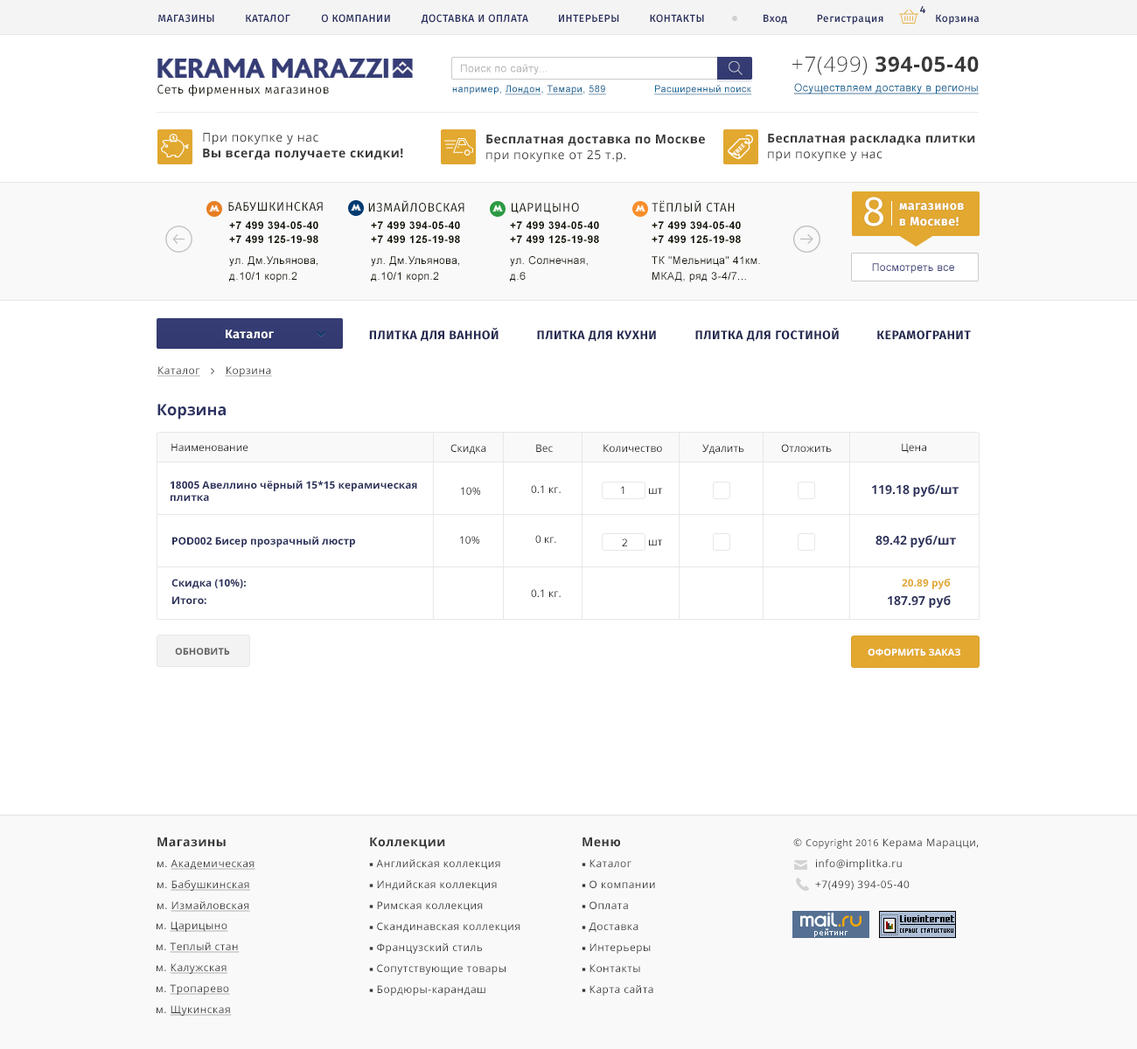
<style>
.page{position:relative;width:1137px;height:1049px;background:#ffffff}
.page>*{position:absolute;margin:0}
.t1{font:10.5px "FiraSans-Medium";letter-spacing:0.04em;color:#292f60}
.t2{font:10.5px "FiraSans-Medium";letter-spacing:0.04em;color:#292f60;text-transform:uppercase}
.t3{font:10.5px "ArialMT";letter-spacing:0.04em;color:#b3b3b3}
.t4{font:21px "OpenSans-Bold";letter-spacing:0.04em;color:#383838;text-transform:uppercase}
.t5{font:21px "OpenSans-Light";letter-spacing:0.04em;color:#383838;text-transform:uppercase}
.t6{font:12.2px "FiraSans-Book";letter-spacing:0.04em;color:#151408}
.t7{font:9.6px "ArialMT";letter-spacing:0.04em;color:#106394}
.t8{font:9.6px "ArialMT";letter-spacing:0.04em;color:#106394;text-decoration:underline}
.t9{font:10.5px "ArialMT";letter-spacing:0.04em;color:#106394;text-decoration:underline}
.t10{font:12.2px/15.7px "OpenSans-Bold";letter-spacing:0.04em;color:#383838}
.t11{font:12.2px/15.7px "OpenSans";letter-spacing:0.04em;color:#383838}
.t12{font:6.1px "FiraSans-Bold";letter-spacing:0.04em;color:#ffffff;text-transform:uppercase}
.t13{font:42px "FiraSans-Book";letter-spacing:0.04em;color:#ffffff}
.t14{font:12.2px "FiraSans-Regular";letter-spacing:0.04em;color:#151408;text-transform:uppercase}
.t15{font:12.2px/15.7px "FiraSans-Bold";letter-spacing:0.04em;color:#ffffff}
.t16{font:10.5px/9.4px "Arial-BoldMT";letter-spacing:0.04em;color:#151408;text-transform:uppercase}
.t17{font:10.5px/14px "Arial-BoldMT";letter-spacing:0.04em;color:#151408;text-transform:uppercase}
.t18{font:10.5px/21px "ArialMT";letter-spacing:0.04em;color:#151408}
.t19{font:10.5px/15.7px "ArialMT";letter-spacing:0.04em;color:#151408}
.t20{font:10.5px "ArialMT";letter-spacing:0.04em;color:#363d75}
.t21{font:12.2px "FiraSans-Bold";letter-spacing:0.04em;color:#ffffff}
.t22{font:12.2px "FiraSans-Bold";letter-spacing:0.04em;color:#222750;text-transform:uppercase}
.t23{font:10.5px "OpenSans";letter-spacing:0.04em;color:#383838;text-decoration:underline}
.t24{font:15.7px "OpenSans-Bold";color:#2d3363}
.t25{font:10.5px "OpenSans";color:#212121}
.t26{font:10.5px/12.2px "OpenSans-Bold";color:#2a305b}
.t27{font:12.2px "OpenSans-Bold";color:#2a305b}
.t28{font:10.5px "OpenSans"}
.t29{font:10.5px "OpenSans-Bold";color:#2a305b}
.t30{font:10.5px "OpenSans-Bold";color:#e2a830}
.t31{font:9.6px "OpenSans-Bold";color:#616161;text-transform:uppercase}
.t32{font:9.6px "OpenSans-Bold";color:#ffffff;text-transform:uppercase}
.t33{font:10.5px/21px "OpenSans";letter-spacing:0.04em;color:#383838;text-decoration:underline}
.t34{font:12.2px/21px "OpenSans-Bold";letter-spacing:0.04em;color:#383838}
.t35{font:10.5px/21px "OpenSans";letter-spacing:0.04em;color:#383838}
.t36{font:10.5px/21px "MinionPro-Regular";letter-spacing:0.04em;color:#383838}
.t37{font:10.5px "OpenSans";letter-spacing:0.04em;color:#383838}
.t38{font:9.6px "OpenSans";letter-spacing:0.04em;color:#383838}
.t39{font:10.5px/15.7px "OpenSans";letter-spacing:0.04em;color:#383838}
</style>
<div class="page">
<p class="t1" style="left:920px;top:5px;width:5px;height:8px">4</p>
<p class="t2" style="left:158px;top:14px;width:56px;height:9px">магазины</p>
<p class="t2" style="left:246px;top:14px;width:44px;height:9px">каталог</p>
<p class="t2" style="left:321px;top:14px;width:69px;height:9px">о компании</p>
<p class="t2" style="left:421px;top:14px;width:107px;height:10px">доставка и оплата</p>
<p class="t2" style="left:559px;top:14px;width:60px;height:8px">интерьеры</p>
<p class="t2" style="left:650px;top:14px;width:54px;height:9px">контакты</p>
<p class="t1" style="left:763px;top:14px;width:24px;height:10px">Вход</p>
<p class="t1" style="left:817px;top:14px;width:66px;height:10px">Регистрация</p>
<p class="t1" style="left:935px;top:14px;width:44px;height:10px">Корзина</p>
<p class="t3" style="left:461px;top:64px;width:86px;height:10px">Поиск по сайту...</p>
<p class="t4" style="left:792px;top:56px;width:186px;height:19px"><span class="t5">+7(499) </span>394-05-40</p>
<p class="t6" style="left:157px;top:84px;width:172px;height:12px">Сеть фирменных магазинов</p>
<p class="t7" style="left:452px;top:85px;width:154px;height:10px">например, <span class="t8">Лондон</span>, <span class="t8">Темари</span>, <span class="t8">589</span></p>
<p class="t8" style="left:654px;top:85px;width:98px;height:10px">Расширенный поиск</p>
<p class="t9" style="left:794px;top:83px;width:184px;height:11px">Осуществляем доставку в регионы</p>
<p class="t10" style="left:203px;top:133px;width:200px;height:28px"><span class="t11">При покупке у нас <br></span>Вы всегда получаете скидки!</p>
<p class="t10" style="left:486px;top:135px;width:219px;height:28px">Бесплатная доставка по Москве <br><span class="t11">при покупке от 25 т.р.</span></p>
<p class="t10" style="left:768px;top:134px;width:207px;height:28px">Бесплатная раскладка плитки <br><span class="t11">при покупке у нас</span></p>
<p class="t12" style="left:733px;top:143px;width:13px;height:13px;rotate:-45deg">Free</p>
<p class="t13" style="left:864px;top:197px;width:19px;height:29px">8</p>
<p class="t14" style="left:228px;top:202px;width:95px;height:10px">БАБУШКИНСКАЯ</p>
<p class="t14" style="left:368px;top:200px;width:96px;height:12px">ИЗМАЙЛОВСКАЯ</p>
<p class="t14" style="left:511px;top:203px;width:68px;height:10px">царицыно</p>
<p class="t14" style="left:651px;top:200px;width:83px;height:12px">ТЁПЛЫЙ СТАН</p>
<p class="t15" style="left:899px;top:203px;width:64px;height:23px">магазинов <br>в Москве!</p>
<p class="t16" style="left:229px;top:221px;width:89px;height:61px">+7 499 394-05-40 <br><span class="t17">+7 499 125-19-98<br></span><span class="t18">ул. Дм.Ульянова, <br></span><span class="t19">д.10/1 корп.2</span></p>
<p class="t16" style="left:371px;top:221px;width:89px;height:61px">+7 499 394-05-40 <br><span class="t17">+7 499 125-19-98<br></span><span class="t18">ул. Дм.Ульянова, <br></span><span class="t19">д.10/1 корп.2</span></p>
<p class="t16" style="left:510px;top:221px;width:89px;height:61px">+7 499 394-05-40 <br><span class="t17">+7 499 125-19-98<br></span><span class="t18">ул. Солнечная, <br></span><span class="t19">д.6</span></p>
<p class="t18" style="left:651px;top:221px;width:109px;height:61px"><span class="t16">+7 499 394-05-40 <br></span><span class="t17">+7 499 125-19-98<br></span>ТК "Мельница" 41км. <br><span class="t19">МКАД, ряд 3-4/7...</span></p>
<p class="t20" style="left:872px;top:263px;width:82px;height:11px">Посмотреть все</p>
<p class="t21" style="left:226px;top:330px;width:48px;height:9px">Каталог</p>
<p class="t22" style="left:369px;top:328px;width:129px;height:14px">плитка для ванной</p>
<p class="t22" style="left:695px;top:328px;width:143px;height:14px">плитка для гостиной</p>
<p class="t22" style="left:537px;top:330px;width:119px;height:12px">плитка для кухни</p>
<p class="t22" style="left:877px;top:330px;width:93px;height:10px">керамогранит</p>
<p class="t23" style="left:157px;top:366px;width:115px;height:11px">Каталог        Корзина</p>
<p class="t24" style="left:157px;top:404px;width:69px;height:16px">Корзина</p>
<p class="t25" style="left:171px;top:443px;width:77px;height:8px">Наименование</p>
<p class="t25" style="left:450px;top:444px;width:36px;height:11px">Скидка</p>
<p class="t25" style="left:536px;top:444px;width:17px;height:8px">Вес</p>
<p class="t25" style="left:603px;top:444px;width:59px;height:8px">Количество</p>
<p class="t25" style="left:702px;top:444px;width:42px;height:11px">Удалить</p>
<p class="t25" style="left:781px;top:444px;width:50px;height:8px">Отложить</p>
<p class="t25" style="left:901px;top:443px;width:25px;height:11px">Цена</p>
<p class="t26" style="left:170px;top:480px;width:247px;height:21px">18005 Авеллино чёрный 15*15 керамическая <br>плитка</p>
<p class="t25" style="left:531px;top:485px;width:29px;height:8px">0.1 кг.</p>
<p class="t27" style="left:872px;top:484px;width:86px;height:13px">119.18 руб/шт</p>
<p class="t25" style="left:461px;top:487px;width:20px;height:8px">10%</p>
<p class="t28" style="left:621px;top:486px;width:3px;height:8px">1</p>
<p class="t25" style="left:649px;top:488px;width:13px;height:6px">шт</p>
<p class="t29" style="left:172px;top:536px;width:183px;height:11px">POD002 Бисер прозрачный люстр</p>
<p class="t25" style="left:460px;top:536px;width:20px;height:8px">10%</p>
<p class="t25" style="left:535px;top:535px;width:21px;height:8px">0 кг.</p>
<p class="t25" style="left:622px;top:539px;width:5px;height:7px">2</p>
<p class="t25" style="left:649px;top:539px;width:13px;height:7px">шт</p>
<p class="t27" style="left:875px;top:535px;width:81px;height:13px">89.42 руб/шт</p>
<p class="t29" style="left:171px;top:579px;width:75px;height:10px">Скидка (10%):</p>
<p class="t30" style="left:901px;top:579px;width:49px;height:10px">20.89 руб</p>
<p class="t25" style="left:531px;top:589px;width:29px;height:8px">0.1 кг.</p>
<p class="t29" style="left:172px;top:596px;width:34px;height:8px">Итого:</p>
<p class="t27" style="left:887px;top:595px;width:63px;height:14px">187.97 руб</p>
<p class="t31" style="left:175px;top:648px;width:55px;height:7px">Обновить</p>
<p class="t32" style="left:867px;top:649px;width:93px;height:7px">оформить заказ</p>
<p class="t33" style="left:157px;top:838px;width:98px;height:74px"><span class="t34">Магазины<br></span><span class="t35">м. </span>Академическая<br><span class="t35">м. </span>Бабушкинская<br><span class="t35">м. </span>Измайловская</p>
<p class="t35" style="left:369px;top:838px;width:151px;height:158px"><span class="t34">Коллекции<br></span><span class="t36">■ </span>Английская коллекция<br><span class="t36">■ </span>Индийская коллекция<br><span class="t36">■ </span>Римская коллекция<br><span class="t36">■ </span>Скандинавская коллекция<br><span class="t36">■ </span>Французский стиль<br><span class="t36">■ </span>Сопутствующие товары<br><span class="t36">■ </span>Бордюры-карандаш</p>
<p class="t35" style="left:581px;top:838px;width:74px;height:158px"><span class="t34">Меню<br></span><span class="t36">■ </span>Каталог<br><span class="t36">■ </span>О компании<br><span class="t36">■ </span>Оплата<br><span class="t36">■ </span>Доставка<br><span class="t36">■ </span>Интерьеры<br><span class="t36">■ </span>Контакты<br><span class="t36">■ </span>Карта сайта</p>
<p class="t37" style="left:793px;top:838px;width:185px;height:11px">© <span class="t38">Copyright 2016</span> Керама Марацци,</p>
<p class="t35" style="left:815px;top:859px;width:94px;height:31px">info@implitka.ru<br>+7(499) 394-05-40</p>
<p class="t33" style="left:156px;top:921px;width:84px;height:95px"><span class="t39"><br></span><span class="t35">м. </span>Царицыно<br><span class="t35">м. </span>Теплый стан<br><span class="t35">м. </span>Калужская<br><span class="t35">м. </span>Тропарево<br><span class="t35">м. </span>Щукинская</p>
</div>
